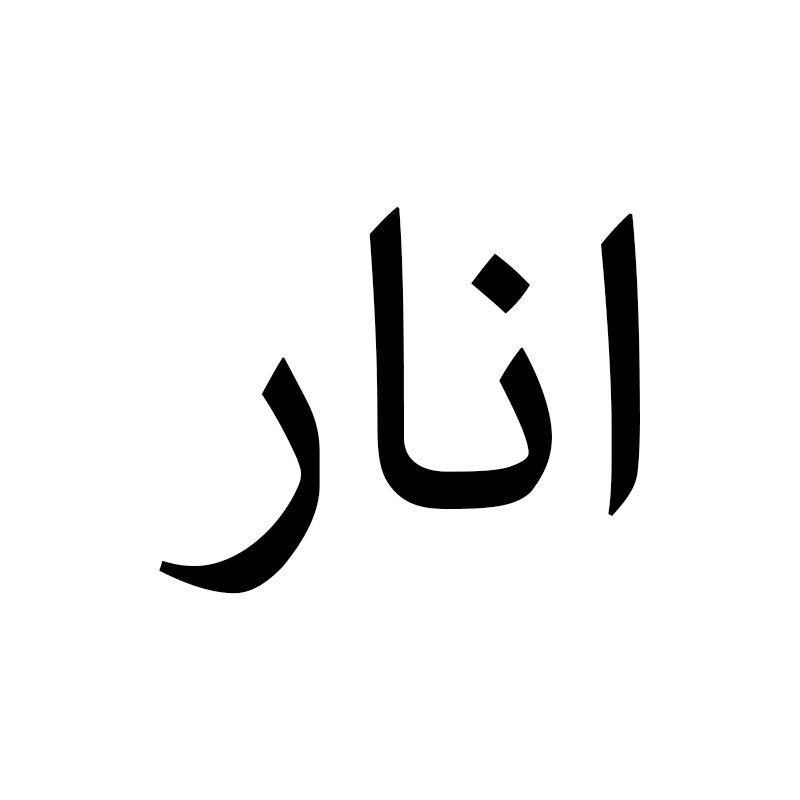
<style>
.page{position:relative;width:800px;height:800px;background:#ffffff}
.page>*{position:absolute;margin:0}
.t1{font:600px "AdobeArabic-Regular";color:#000000}
</style>
<div class="page">
<p class="t1" style="left:159px;top:206px;width:481px;height:388px">انار</p>
</div>
